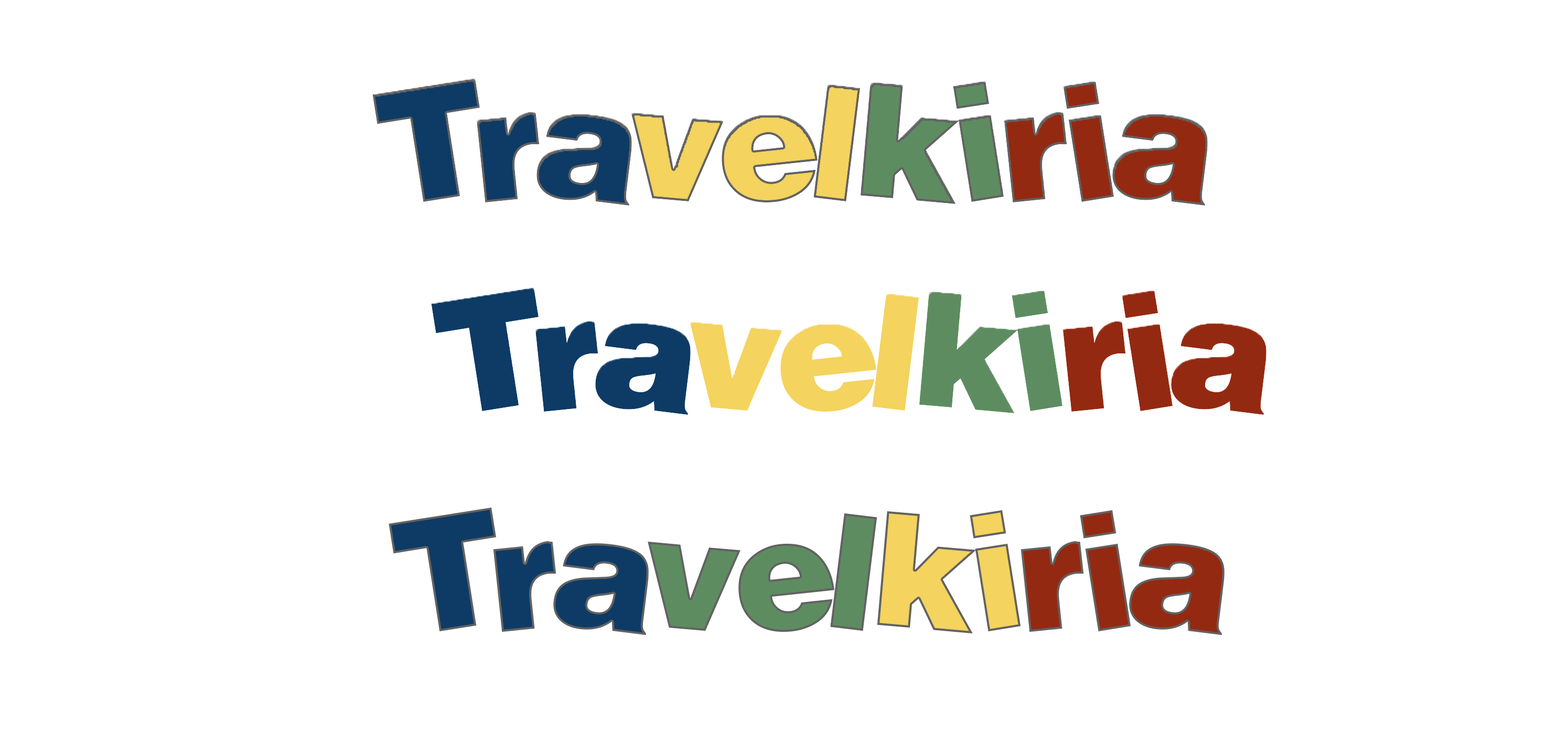
<style>
.page{position:relative;width:1568px;height:743px;background:#ffffff}
.page>*{position:absolute;margin:0}
.t1{font:157.3px "Soopafresh";color:#0d3b66}
.t2{font:157.3px "Soopafresh";color:#f4d35e}
.t3{font:157.3px "Soopafresh";color:#5e8c61}
.t4{font:157.3px "Soopafresh";color:#942911}
</style>
<div class="page">
<p class="t1" style="left:372px;top:78px;width:836px;height:128px">Tra<span class="t2">vel</span><span class="t3">ki</span><span class="t4">ria</span></p>
<p class="t1" style="left:431px;top:287px;width:835px;height:128px">Tra<span class="t2">vel</span><span class="t3">ki</span><span class="t4">ria</span></p>
<p class="t1" style="left:389px;top:508px;width:836px;height:127px">Tra<span class="t3">vel</span><span class="t2">ki</span><span class="t4">ria</span></p>
</div>
